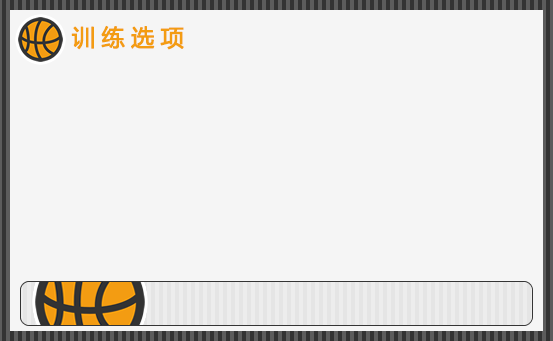
<style>
.page{position:relative;width:553px;height:341px;background:#f5f5f5}
.page>*{position:absolute;margin:0}
.t1{font:23px "MicrosoftYaHei";letter-spacing:0.26em;color:#f39c12;font-weight:bold}
</style>
<div class="page">
<p class="t1" style="left:71px;top:25px;width:113px;height:25px">训练选项</p>
</div>
